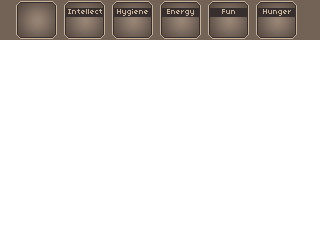
<style>
.page{position:relative;width:320px;height:240px;background:#ffffff}
.page>*{position:absolute;margin:0}
.t1{font:8px "04b03";color:#c7b299}
</style>
<div class="page">
<p class="t1" style="left:68px;top:9px;width:34px;height:5px">Intellect</p>
<p class="t1" style="left:117px;top:9px;width:31px;height:7px">Hygiene</p>
<p class="t1" style="left:167px;top:9px;width:27px;height:7px">Energy</p>
<p class="t1" style="left:222px;top:9px;width:13px;height:5px">Fun</p>
<p class="t1" style="left:263px;top:9px;width:28px;height:7px">Hunger</p>
</div>
